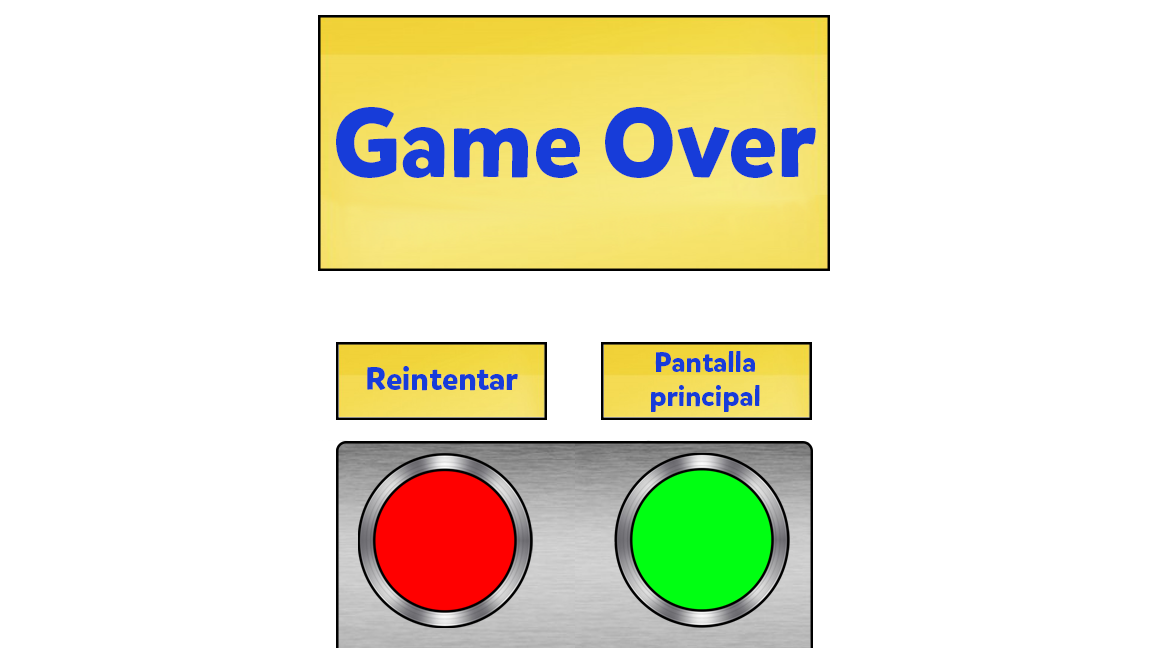
<style>
.page{position:relative;width:1152px;height:648px;background:#ffffff}
.page>*{position:absolute;margin:0}
.t1{font:98px "MikadoBoldDEMO";color:#173cd9}
.t2{font:28px "MikadoBoldDEMO";color:#173cd9}
.t3{font:32px "MikadoBoldDEMO";color:#173cd9}
</style>
<div class="page">
<p class="t1" style="left:336px;top:107px;width:480px;height:71px">Game Over</p>
<p class="t2" style="left:651px;top:351px;width:109px;height:61px;text-align:center">Pantalla<br>principal</p>
<p class="t3" style="left:367px;top:366px;width:151px;height:25px">Reintentar</p>
</div>
